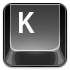
<style>
.page{position:relative;width:70px;height:70px}
.page>*{position:absolute;margin:0}
.t1{font:30px "MyriadPro-Semibold";color:#fefcfc}
</style>
<div class="page">
<p class="t1" style="left:19px;top:12px;width:16px;height:21px">K</p>
</div>
